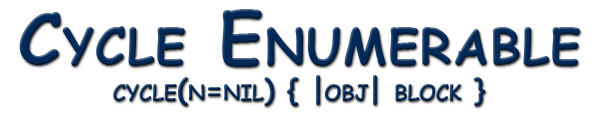
<style>
.page{position:relative;width:600px;height:117px;background:#ffffff}
.page>*{position:absolute;margin:0}
.t1{font:30px/36px "ComicSansMS-Bold";color:#022958;font-variant:small-caps}
.t2{font:70px/338.4px "ComicSansMS-Bold";letter-spacing:0.025em;color:#022958;font-variant:small-caps}
</style>
<div class="page">
<p class="t1" style="left:19px;top:9px;width:561px;height:97px;text-align:center"><span class="t2">Cycle Enumerable<br></span>cycle(n=nil) { |obj| block }</p>
</div>
